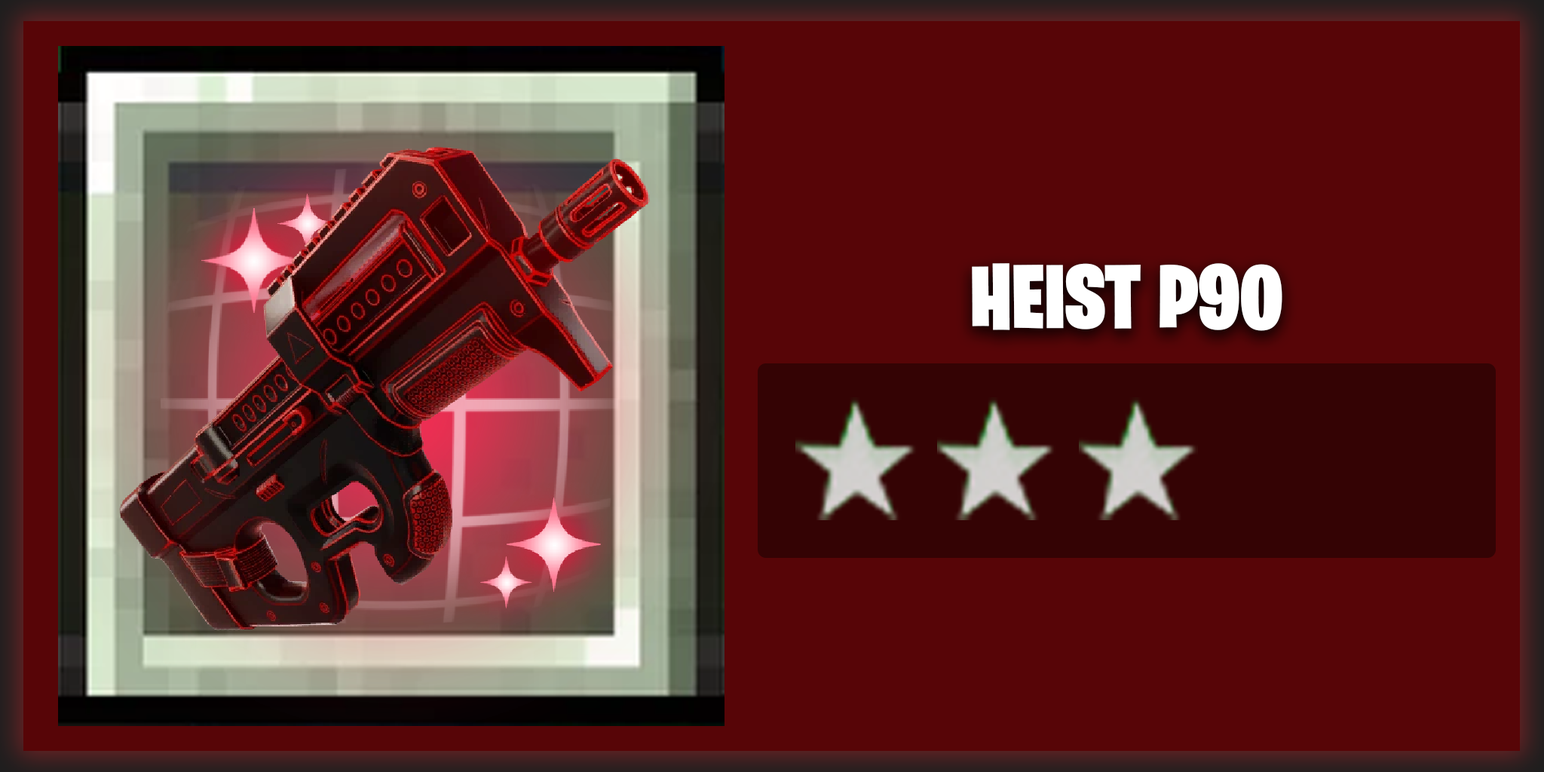
<style>
.page{position:relative;width:1544px;height:772px;background:#570507}
.page>*{position:absolute;margin:0}
.t1{font:90.5px "BurbankBigCondensed-Black";color:#ffffff}
</style>
<div class="page">
<p class="t1" style="left:972px;top:263px;width:311px;height:68px">HEIST P90</p>
</div>
